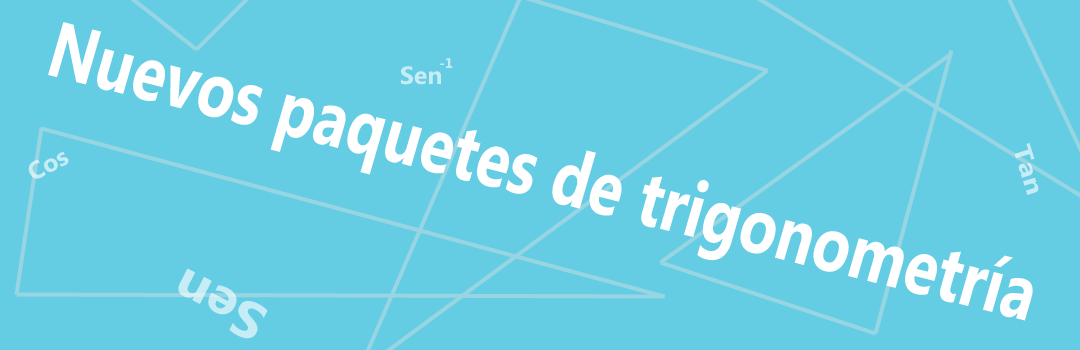
<style>
.page{position:relative;width:1080px;height:350px;background:#65cde3}
.page>*{position:absolute;margin:0}
.t1{font:78.5px "MicrosoftNewTaiLue-Bold";color:#ffffff;scale:0.79 1}
</style>
<div class="page">
<p class="t1" style="left:48px;top:22px;width:985px;height:299px;rotate:14deg">Nuevos paquetes de trigonometría</p>
</div>
